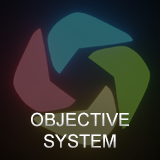
<style>
.page{position:relative;width:160px;height:160px}
.page>*{position:absolute;margin:0}
.t1{font:18px "ArialMT";color:#ffffff;text-transform:uppercase}
</style>
<div class="page">
<p class="t1" style="left:31px;top:112px;width:98px;height:36px;text-align:center">objective<br>system</p>
</div>
